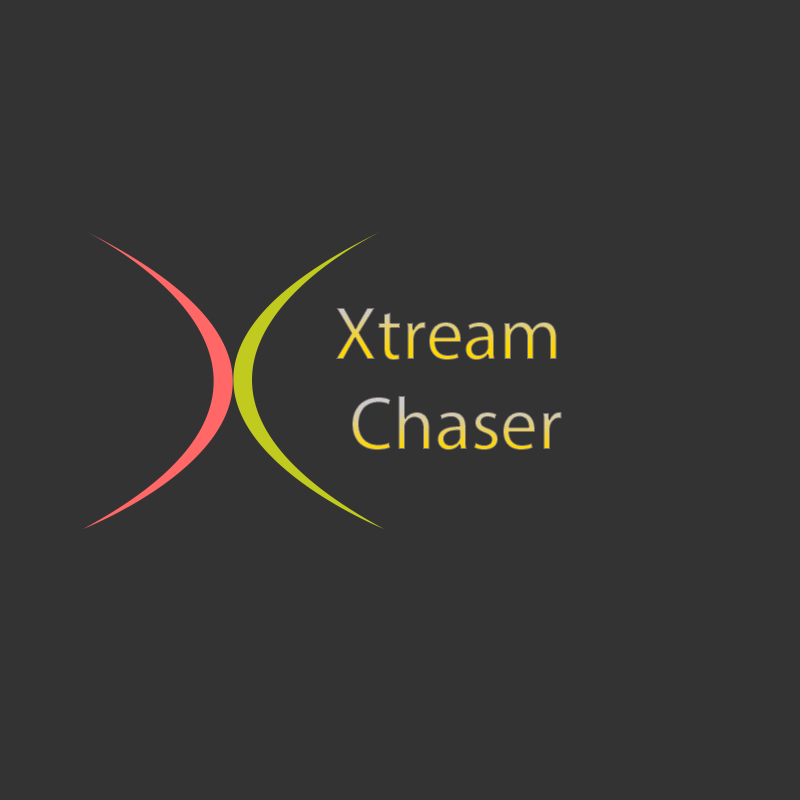
<style>
.page{position:relative;width:800px;height:800px;background:#333333}
.page>*{position:absolute;margin:0}
.t1{font:75px "MyriadPro-Regular"}
</style>
<div class="page">
<p class="t1" style="left:336px;top:308px;width:226px;height:142px;text-align:center">Xtream <br>Chaser</p>
</div>
